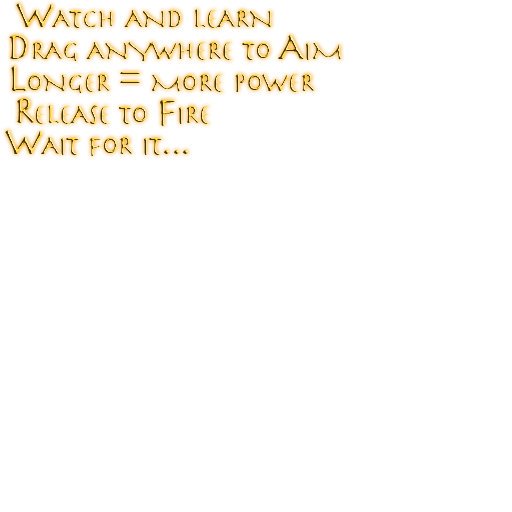
<style>
.page{position:relative;width:512px;height:512px;background:#ffffff}
.page>*{position:absolute;margin:0}
.t1{font:40px "Herculanum";letter-spacing:-0.05em;font-variant:small-caps}
</style>
<div class="page">
<p class="t1" style="left:16px;top:3px;width:256px;height:25px">Watch and learn</p>
<p class="t1" style="left:9px;top:35px;width:333px;height:26px">Drag anywhere to Aim</p>
<p class="t1" style="left:11px;top:66px;width:304px;height:27px">Longer = more power</p>
<p class="t1" style="left:17px;top:98px;width:193px;height:28px">Release to Fire</p>
<p class="t1" style="left:5px;top:130px;width:183px;height:26px">Wait for it...</p>
</div>
